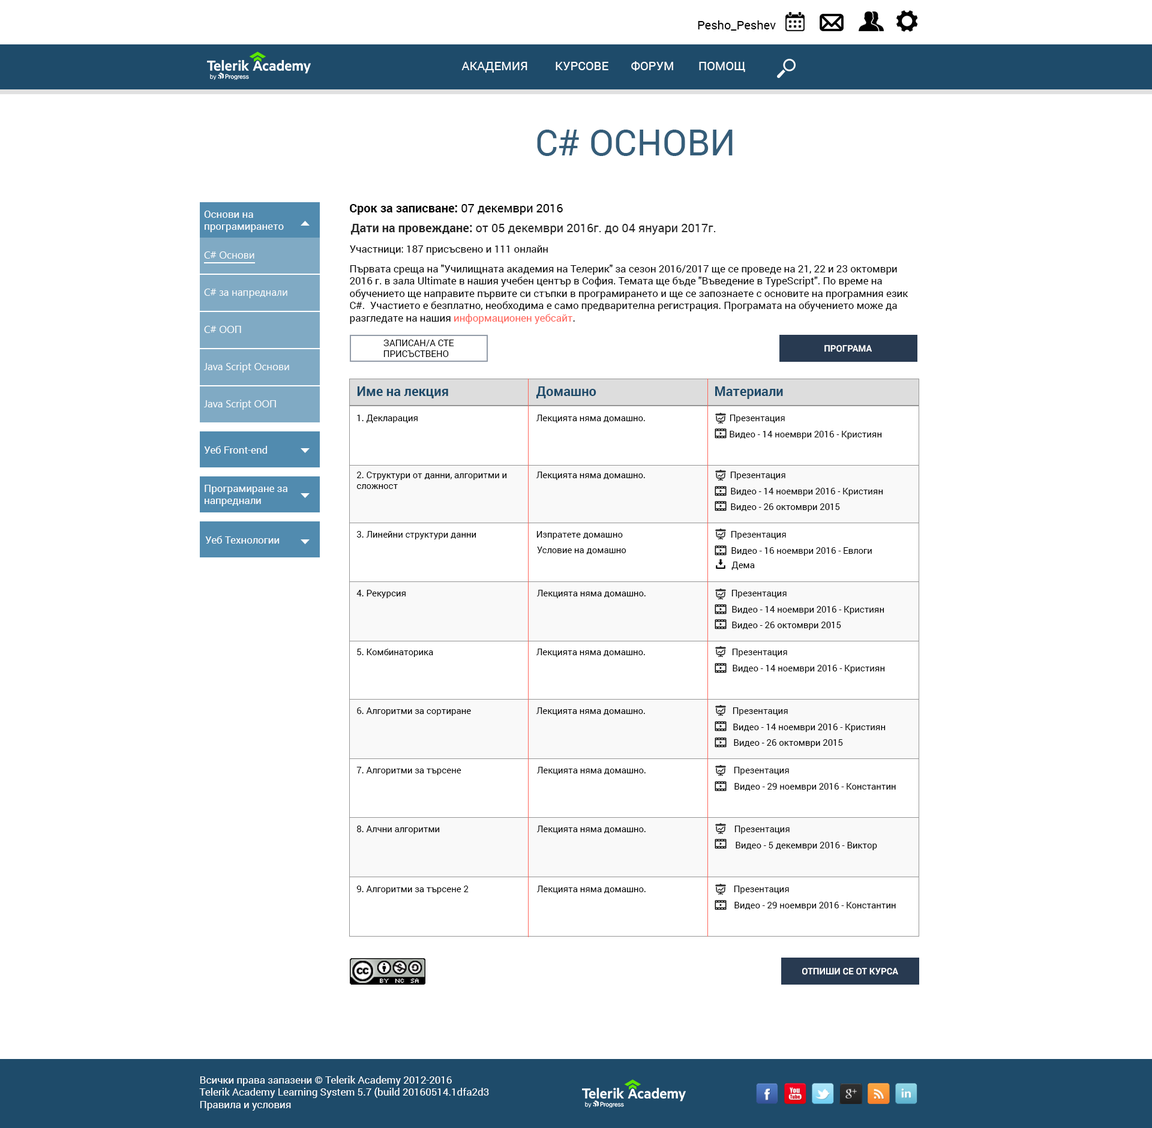
<style>
.page{position:relative;width:1152px;height:1128px;background:#ffffff}
.page>*{position:absolute;margin:0}
.t1{font:12px "Roboto-Regular";color:#000000}
.t2{font:12px "Roboto-Regular";color:#ffffff}
.t3{font:36px "Roboto-Regular";color:#355d79}
.t4{font:12px "Roboto-Bold";color:#000000}
.t5{font:10.2px "Roboto-Regular";color:#fefefe}
.t6{font:12px "Roboto-Regular";color:#262626}
.t7{font:12px "Roboto-Bold";color:#262626}
.t8{font:10.2px "Roboto-Regular";color:#000000}
.t9{font:10.2px "SegoeUI";color:#fefefe}
.t10{font:10.2px "Roboto-Regular";color:#ff6358}
.t11{font:9px "Roboto-Regular";color:#000000}
.t12{font:9px "Roboto-Bold";color:#ffffff}
.t13{font:13.2px "Roboto-Bold";color:#1e4b6a}
.t14{font:10.2px "Roboto-Regular";color:#ffffff}
</style>
<div class="page">
<p class="t1" style="left:698px;top:20px;width:78px;height:11px">Pesho_Peshev</p>
<p class="t2" style="left:461px;top:62px;width:66px;height:11px">АКАДЕМИЯ</p>
<p class="t2" style="left:556px;top:62px;width:52px;height:8px">КУРСОВЕ</p>
<p class="t2" style="left:631px;top:61px;width:42px;height:10px">ФОРУМ</p>
<p class="t2" style="left:699px;top:62px;width:46px;height:10px">ПОМОЩ</p>
<p class="t3" style="left:537px;top:130px;width:196px;height:26px">C# ОСНОВИ</p>
<p class="t4" style="left:350px;top:204px;width:213px;height:11px">Срок за записване: <span class="t1">07 декември 2016</span></p>
<p class="t5" style="left:204px;top:211px;width:80px;height:21px;text-align:right">Основи на програмирането</p>
<p class="t6" style="left:350px;top:224px;width:366px;height:11px"><span class="t7">Дати на провеждане:</span> от 05 декември 2016г. до 04 януари 2017г.</p>
<p class="t8" style="left:350px;top:245px;width:198px;height:10px">Участници: 187 присъсвено и 111 онлайн</p>
<p class="t9" style="left:204px;top:251px;width:50px;height:8px">C# Основи</p>
<p class="t8" style="left:350px;top:265px;width:558px;height:59px;text-align:right">Първата среща на "Училищната академия на Телерик" за сезон 2016/2017 ще се проведе на 21, 22 и 23 октомври 2016 г. в зала Ultimate в нашия учебен център в София. Темата ще бъде "Въведение в TypeScript". По време на обучението ще направите първите си стъпки в програмирането и ще се запознаете с основите на програмния език C#.  Участието е безплатно, необходима е само предварителна регистрация. Програмата на обучението може да разгледате на нашия <span class="t10">информационен уебсайт</span>.</p>
<p class="t9" style="left:204px;top:289px;width:83px;height:9px">C# за напреднали</p>
<p class="t9" style="left:204px;top:326px;width:37px;height:7px">C# ООП</p>
<p class="t11" style="left:383px;top:340px;width:71px;height:17px;text-align:right">ЗАПИСАН/А СТЕ<br>ПРИСЪСТВЕНО</p>
<p class="t12" style="left:824px;top:345px;width:48px;height:7px">ПРОГРАМА</p>
<p class="t9" style="left:204px;top:362px;width:85px;height:11px">Java Script Основи</p>
<p class="t13" style="left:357px;top:386px;width:91px;height:12px">Име на лекция</p>
<p class="t13" style="left:536px;top:386px;width:60px;height:12px">Домашно</p>
<p class="t13" style="left:715px;top:386px;width:68px;height:13px">Материали</p>
<p class="t9" style="left:204px;top:400px;width:72px;height:10px">Java Script ООП</p>
<p class="t11" style="left:357px;top:415px;width:61px;height:8px">1. Декларация</p>
<p class="t11" style="left:536px;top:415px;width:109px;height:8px">Лекцията няма домашно.</p>
<p class="t11" style="left:730px;top:415px;width:55px;height:8px">Презентация</p>
<p class="t11" style="left:730px;top:431px;width:152px;height:8px">Видео - 14 ноември 2016 - Кристиян</p>
<p class="t5" style="left:204px;top:446px;width:63px;height:8px">Уеб Front-end</p>
<p class="t11" style="left:356px;top:472px;width:151px;height:17px;text-align:right">2. Структури от данни, алгоритми и сложност</p>
<p class="t11" style="left:536px;top:472px;width:109px;height:8px">Лекцията няма домашно.</p>
<p class="t11" style="left:730px;top:472px;width:55px;height:8px">Презентация</p>
<p class="t5" style="left:205px;top:485px;width:82px;height:21px;text-align:right">Програмиране за напреднали</p>
<p class="t11" style="left:731px;top:488px;width:152px;height:8px">Видео - 14 ноември 2016 - Кристиян</p>
<p class="t11" style="left:731px;top:503px;width:109px;height:9px">Видео - 26 октомври 2015</p>
<p class="t11" style="left:356px;top:531px;width:120px;height:8px">3. Линейни структури данни</p>
<p class="t11" style="left:536px;top:531px;width:87px;height:8px">Изпратете домашно</p>
<p class="t11" style="left:731px;top:531px;width:55px;height:8px">Презентация</p>
<p class="t5" style="left:205px;top:536px;width:75px;height:8px">Уеб Технологии</p>
<p class="t11" style="left:537px;top:547px;width:89px;height:7px">Условие на домашно</p>
<p class="t11" style="left:731px;top:547px;width:141px;height:9px">Видео - 16 ноември 2016 - Евлоги</p>
<p class="t11" style="left:731px;top:562px;width:24px;height:8px">Дема</p>
<p class="t11" style="left:356px;top:590px;width:50px;height:8px">4. Рекурсия</p>
<p class="t11" style="left:537px;top:590px;width:109px;height:8px">Лекцията няма домашно.</p>
<p class="t11" style="left:731px;top:590px;width:56px;height:8px">Презентация</p>
<p class="t11" style="left:732px;top:606px;width:152px;height:8px">Видео - 14 ноември 2016 - Кристиян</p>
<p class="t11" style="left:732px;top:622px;width:109px;height:8px">Видео - 26 октомври 2015</p>
<p class="t11" style="left:357px;top:649px;width:76px;height:8px">5. Комбинаторика</p>
<p class="t11" style="left:536px;top:649px;width:109px;height:8px">Лекцията няма домашно.</p>
<p class="t11" style="left:732px;top:649px;width:55px;height:8px">Презентация</p>
<p class="t11" style="left:733px;top:665px;width:152px;height:8px">Видео - 14 ноември 2016 - Кристиян</p>
<p class="t11" style="left:357px;top:707px;width:114px;height:9px">6. Алгоритми за сортиране</p>
<p class="t11" style="left:536px;top:707px;width:109px;height:9px">Лекцията няма домашно.</p>
<p class="t11" style="left:733px;top:707px;width:55px;height:9px">Презентация</p>
<p class="t11" style="left:733px;top:724px;width:153px;height:8px">Видео - 14 ноември 2016 - Кристиян</p>
<p class="t11" style="left:734px;top:739px;width:109px;height:9px">Видео - 26 октомври 2015</p>
<p class="t11" style="left:356px;top:767px;width:105px;height:8px">7. Алгоритми за търсене</p>
<p class="t11" style="left:537px;top:767px;width:109px;height:8px">Лекцията няма домашно.</p>
<p class="t11" style="left:734px;top:767px;width:55px;height:8px">Презентация</p>
<p class="t11" style="left:734px;top:783px;width:162px;height:8px">Видео - 29 ноември 2016 - Константин</p>
<p class="t11" style="left:357px;top:826px;width:83px;height:8px">8. Алчни алгоритми</p>
<p class="t11" style="left:537px;top:826px;width:109px;height:8px">Лекцията няма домашно.</p>
<p class="t11" style="left:734px;top:826px;width:56px;height:8px">Презентация</p>
<p class="t11" style="left:736px;top:842px;width:141px;height:8px">Видео - 5 декември 2016 - Виктор</p>
<p class="t11" style="left:356px;top:886px;width:113px;height:8px">9. Алгоритми за търсене 2</p>
<p class="t11" style="left:537px;top:886px;width:109px;height:8px">Лекцията няма домашно.</p>
<p class="t11" style="left:734px;top:886px;width:55px;height:8px">Презентация</p>
<p class="t11" style="left:734px;top:902px;width:162px;height:8px">Видео - 29 ноември 2016 - Константин</p>
<p class="t12" style="left:802px;top:968px;width:96px;height:7px">ОТПИШИ СЕ ОТ КУРСА</p>
<p class="t14" style="left:199px;top:1076px;width:290px;height:35px;text-align:right">Всички права запазени © Telerik Academy 2012-2016<br>Telerik Academy Learning System 5.7 (build 20160514.1dfa2d3<br>Правила и условия</p>
</div>
